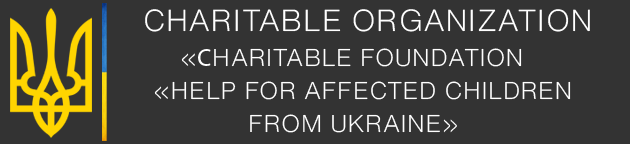
<style>
.page{position:relative;width:630px;height:144px;background:#333333}
.page>*{position:absolute;margin:0}
.t1{font:30px "HelveticaNowText-Light";letter-spacing:0.025em;color:#ffffff}
.t2{font:24px "HelveticaNowText-Light";letter-spacing:0.025em;color:#ffffff}
.t3{font:24px "MyriadPro-Regular";letter-spacing:0.025em;color:#ffffff}
</style>
<div class="page">
<p class="t1" style="left:145px;top:9px;width:445px;height:23px">CHARITABLE ORGANIZATION</p>
<p class="t2" style="left:181px;top:48px;width:341px;height:19px">«<span class="t3">С</span>HARITABLE FOUNDATION</p>
<p class="t2" style="left:154px;top:81px;width:417px;height:19px">«HELP FOR AFFECTED CHILDREN</p>
<p class="t2" style="left:250px;top:114px;width:207px;height:19px">FROM UKRAINE»</p>
</div>
